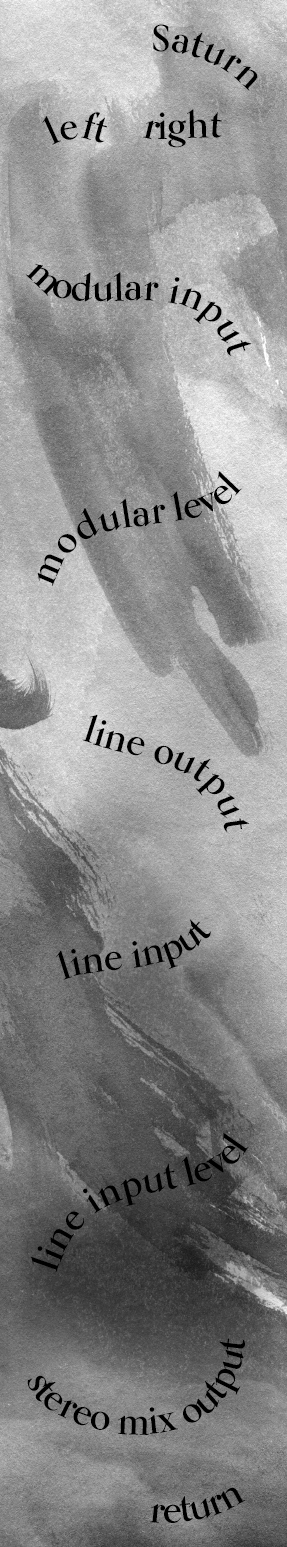
<style>
.page{position:relative;width:287px;height:1547px}
.page>*{position:absolute;margin:0}
.t1{font:37.5px/34.2px "KumlienPro-Bold";color:#000000}
.t2{font:37.5px "KumlienPro-Bold";color:#000000}
.t3{font:37.5px/92.5px "KumlienPro-Bold";color:#000000}
</style>
<div class="page">
<p class="t1" style="left:153px;top:24px;width:105px;height:67px">Saturn</p>
<p class="t2" style="left:42px;top:112px;width:65px;height:33px">left</p>
<p class="t2" style="left:143px;top:109px;width:79px;height:39px">right</p>
<p class="t3" style="left:25px;top:264px;width:227px;height:92px">modular input</p>
<p class="t2" style="left:37px;top:471px;width:205px;height:115px">modular level</p>
<p class="t2" style="left:82px;top:714px;width:167px;height:118px">line output</p>
<p class="t2" style="left:56px;top:919px;width:155px;height:61px">line input</p>
<p class="t2" style="left:31px;top:1133px;width:218px;height:140px">line input level</p>
<p class="t2" style="left:27px;top:1338px;width:218px;height:97px">stereo mix output</p>
<p class="t2" style="left:150px;top:1487px;width:95px;height:36px">return</p>
</div>
